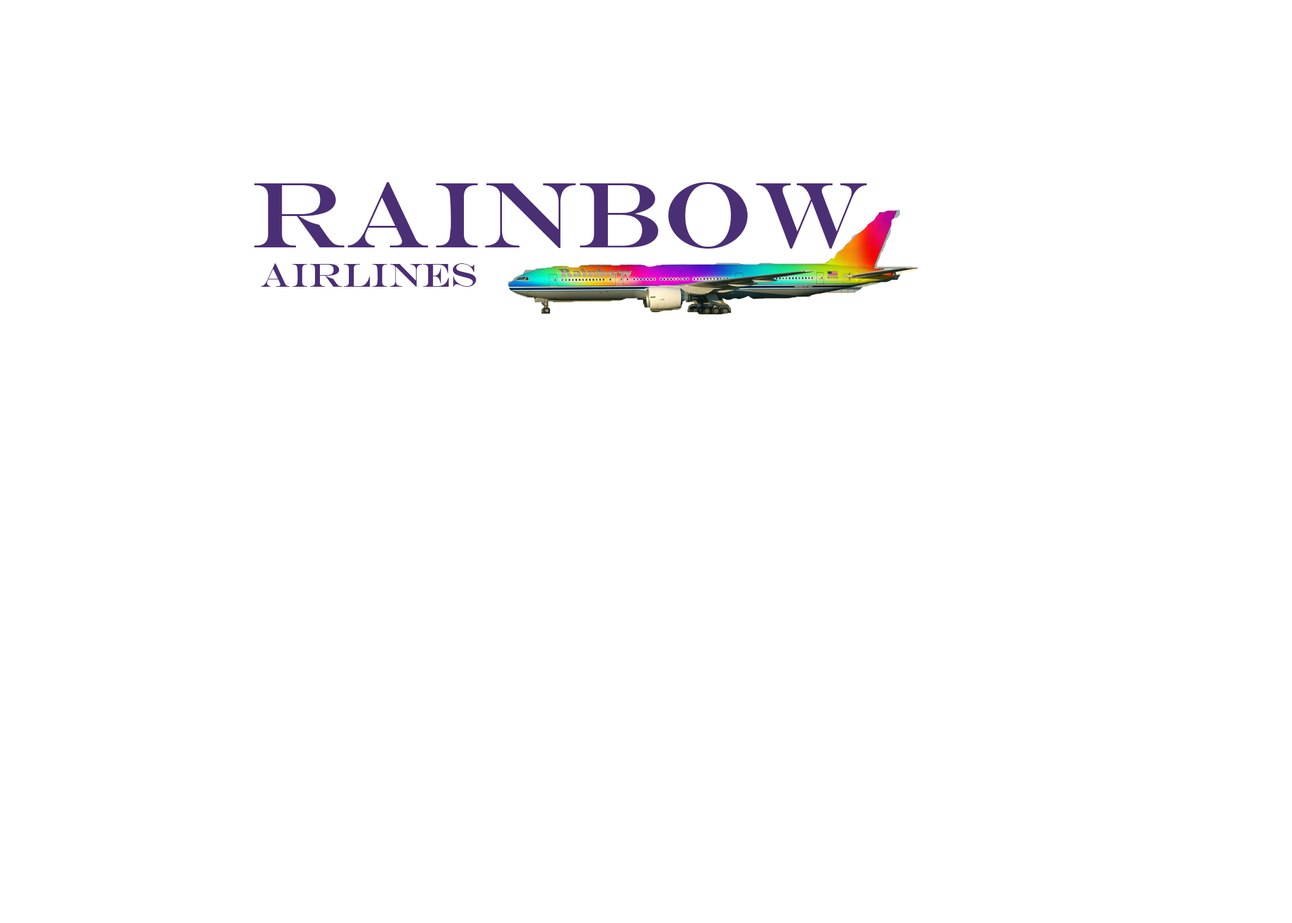
<style>
.page{position:relative;width:1292px;height:923px;background:#ffffff}
.page>*{position:absolute;margin:0}
.t1{font:33px "EngraversMT";color:#4b2f75;scale:1.03 1}
.t2{font:93.6px "EngraversMT";color:#4b2f75;scale:1.03 1}
</style>
<div class="page">
<p class="t1" style="left:254px;top:182px;width:613px;height:105px"><span class="t2">rainbow<br></span> airlines</p>
</div>
